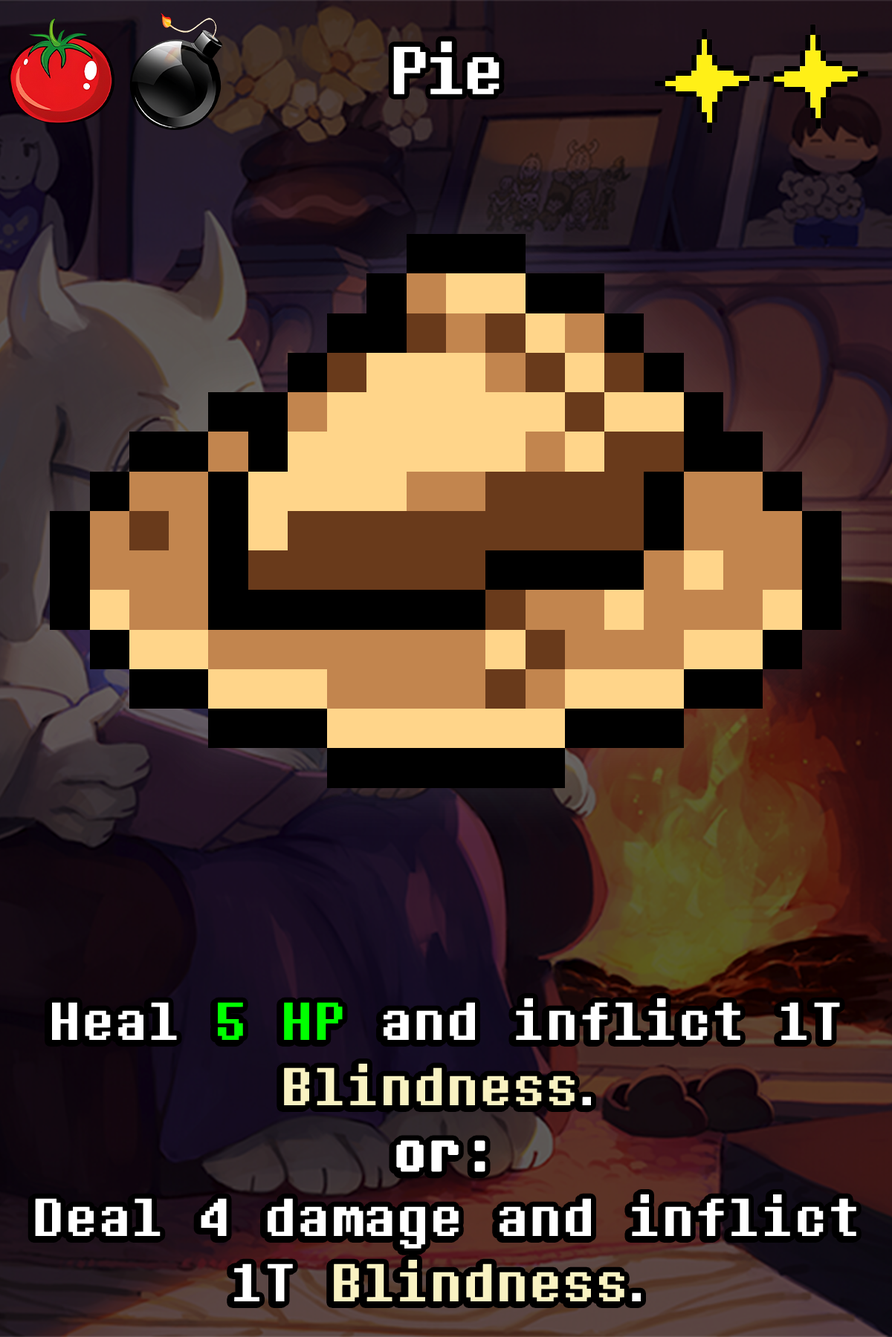
<style>
.page{position:relative;width:892px;height:1337px}
.page>*{position:absolute;margin:0}
.t1{font:144.1px "DeterminationSansWeb";color:#ffffff}
.t2{font:113.7px/65.4px "DeterminationMonoWeb";color:#ffffff}
.t3{font:113.7px/65.4px "DeterminationMonoWeb";color:#00ff00}
.t4{font:113.7px/65.4px "DeterminationMonoWeb";color:#f9f2c2}
.t5{font:113.7px/65.4px "DeterminationMonoWeb";color:#ffffff;font-weight:bold}
</style>
<div class="page">
<p class="t1" style="left:393px;top:41px;width:106px;height:53px">Pie</p>
<p class="t2" style="left:35px;top:999px;width:821px;height:303px;text-align:center">Heal <span class="t3">5 HP</span> and inflict 1T <span class="t4">Blindness</span>.<br><span class="t5">or:<br></span>Deal 4 damage and inflict 1T <span class="t4">Blindness</span>.</p>
</div>
